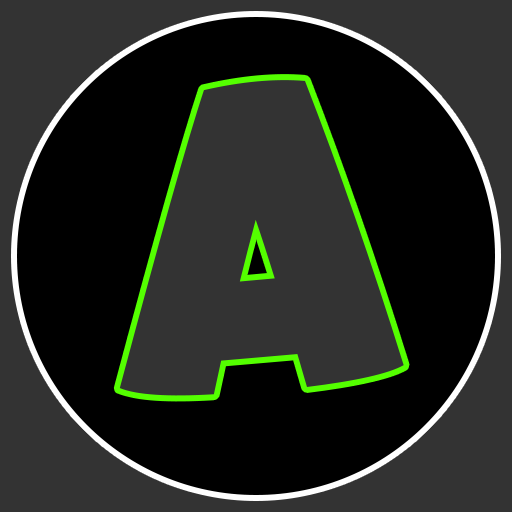
<style>
.page{position:relative;width:512px;height:512px;background:#333333}
.page>*{position:absolute;margin:0}
.t1{font:281.1px "KidsMagazine";color:#333333;text-transform:uppercase}
</style>
<div class="page">
<p class="t1" style="left:119px;top:80px;width:285px;height:316px">A</p>
</div>
